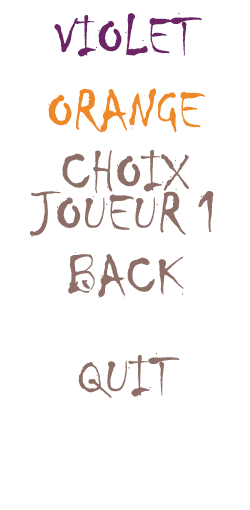
<style>
.page{position:relative;width:250px;height:510px;background:#ffffff}
.page>*{position:absolute;margin:0}
.t1{font:58.3px "Chiller-Regular";color:#6c2466}
.t2{font:58.3px "Chiller-Regular";color:#ef8a26}
.t3{font:58.3px "Chiller-Regular";color:#8e6f67}
</style>
<div class="page">
<p class="t1" style="left:54px;top:12px;width:148px;height:45px">VIOLET</p>
<p class="t2" style="left:48px;top:88px;width:157px;height:45px">ORANGE</p>
<p class="t3" style="left:30px;top:150px;width:184px;height:87px">CHOIX JOUEUR 1</p>
<p class="t3" style="left:68px;top:252px;width:116px;height:46px">BACK</p>
<p class="t3" style="left:78px;top:352px;width:102px;height:46px">QUIT</p>
</div>
